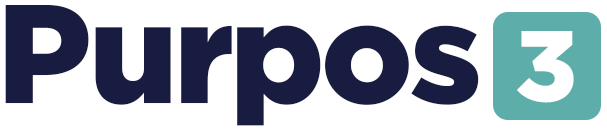
<style>
.page{position:relative;width:607px;height:133px;background:#ffffff}
.page>*{position:absolute;margin:0}
.t1{font:140px "Gotham-Black";letter-spacing:-0.025em;color:#181c41}
.t2{font:100px "Gotham-Black";letter-spacing:-0.025em;color:#ffffff}
</style>
<div class="page">
<p class="t1" style="left:5px;top:5px;width:474px;height:121px">Purpos</p>
<p class="t2" style="left:516px;top:31px;width:58px;height:72px">3</p>
</div>
